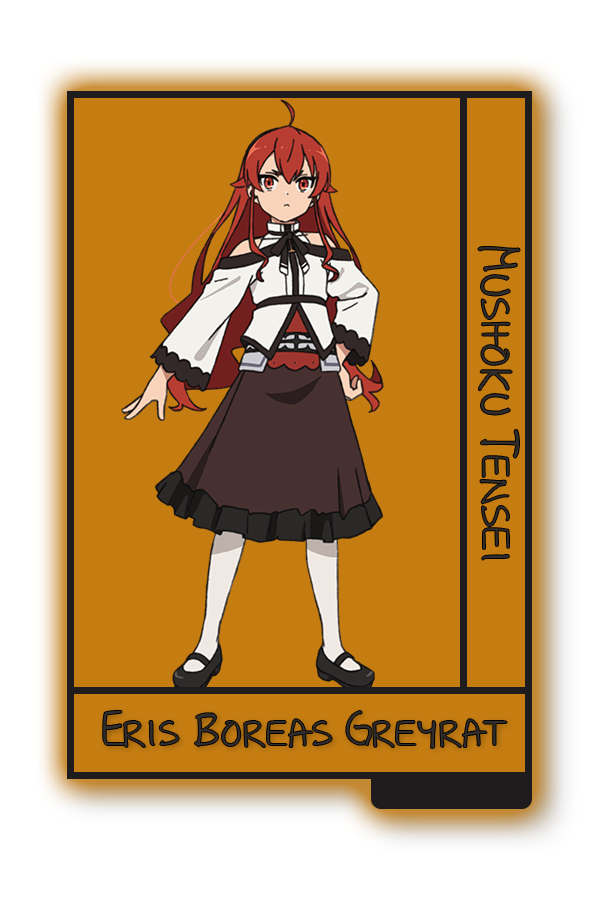
<style>
.page{position:relative;width:600px;height:900px;background:#c57d12}
.page>*{position:absolute;margin:0}
.t1{font:41px "AllCaps";color:#312d2d}
.t2{font:38.3px "AllCaps";color:#312d2d}
</style>
<div class="page">
<p class="t1" style="left:478px;top:247px;width:42px;height:313px;rotate:90deg">Mushoku Tensei</p>
<p class="t2" style="left:103px;top:711px;width:404px;height:37px">Eris Boreas Greyrat</p>
</div>
